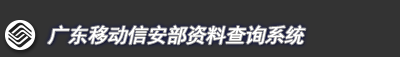
<style>
.page{position:relative;width:400px;height:57px;background:#333333}
.page>*{position:absolute;margin:0}
.t1{font:20.5px "SimHei";letter-spacing:-0.04em;color:#ffffff;font-weight:bold}
</style>
<div class="page">
<p class="t1" style="left:47px;top:25px;width:259px;height:20px">广东移动信安部资料查询系统</p>
</div>
